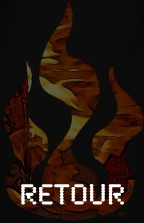
<style>
.page{position:relative;width:144px;height:223px}
.page>*{position:absolute;margin:0}
.t1{font:30px "SynchroLET";color:#fbfcfa}
</style>
<div class="page">
<p class="t1" style="left:21px;top:184px;width:103px;height:21px">Retour</p>
<p class="t1" style="left:21px;top:184px;width:103px;height:21px">Retour</p>
</div>
